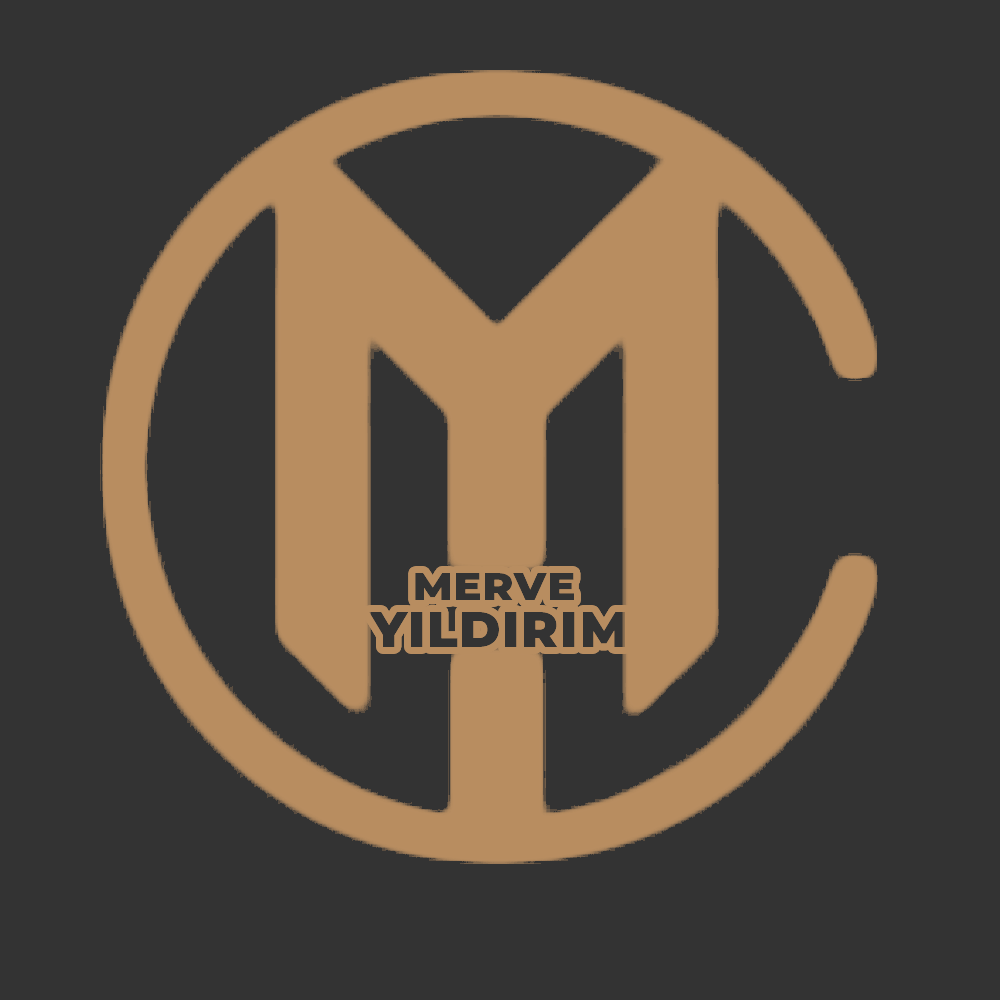
<style>
.page{position:relative;width:1000px;height:1000px;background:#333333}
.page>*{position:absolute;margin:0}
.t1{font:47.4px "Montserrat-ExtraBold";color:#333333;font-variant:small-caps;scale:1.04 1}
.t2{font:60.4px "Montserrat-ExtraBold";color:#333333;font-variant:small-caps}
</style>
<div class="page">
<p class="t1" style="left:415px;top:573px;width:159px;height:27px">merve</p>
<p class="t2" style="left:369px;top:612px;width:256px;height:35px">yıldırım</p>
</div>
